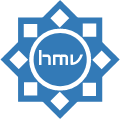
<style>
.page{position:relative;width:120px;height:120px;background:#ffffff}
.page>*{position:absolute;margin:0}
.t1{font:19.9px "Audiowide-Regular";color:#ffffff}
</style>
<div class="page">
<p class="t1" style="left:39px;top:49px;width:44px;height:16px">hmv</p>
</div>
